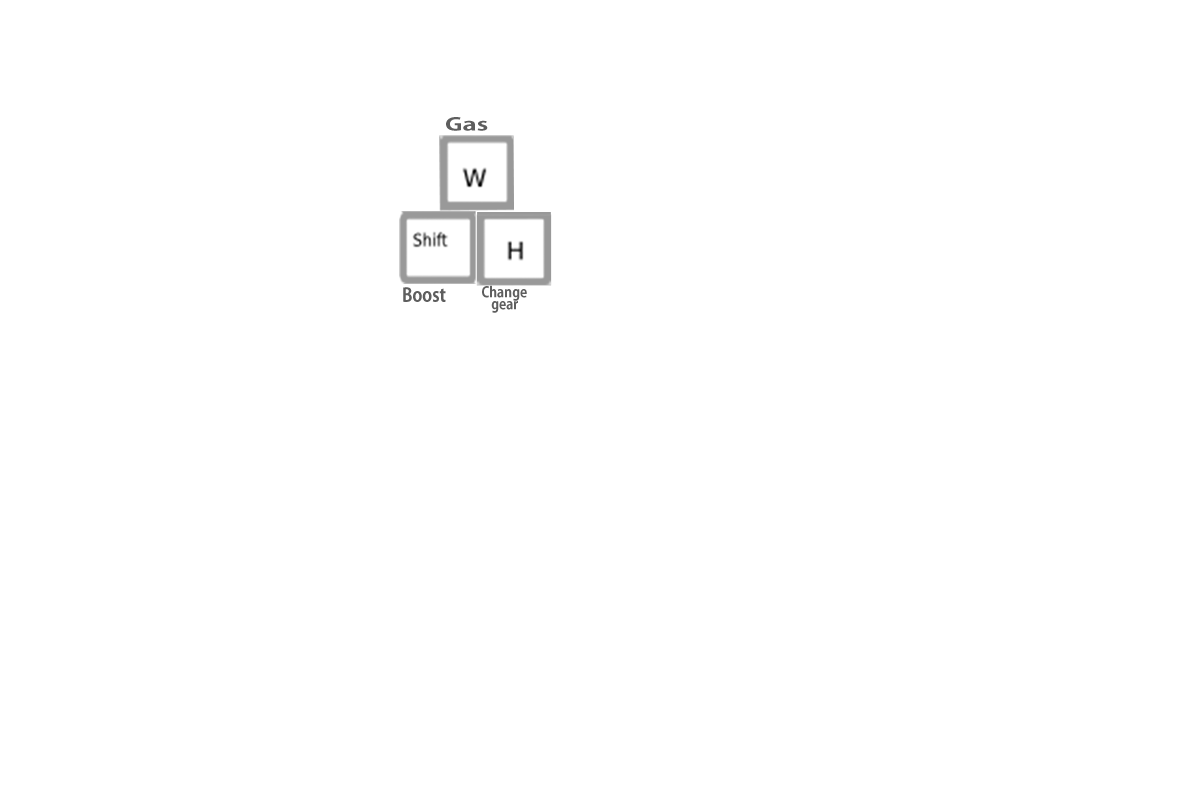
<style>
.page{position:relative;width:1200px;height:800px;background:#ffffff}
.page>*{position:absolute;margin:0}
.t1{font:17.1px "AdobeGothicStd-Bold";color:#5e5e5e;scale:1.49 1}
.t2{font:18.9px "AdobeGothicStd-Bold";color:#5e5e5e;scale:0.88 1}
.t3{font:14.2px "AdobeGothicStd-Bold";color:#5e5e5e;scale:0.92 1}
.t4{font:14.2px "AdobeGothicStd-Bold";color:#5e5e5e;scale:0.91 1}
</style>
<div class="page">
<p class="t1" style="left:446px;top:117px;width:42px;height:14px">Gas</p>
<p class="t2" style="left:403px;top:287px;width:43px;height:15px">Boost</p>
<p class="t3" style="left:482px;top:285px;width:45px;height:16px">Change</p>
<p class="t4" style="left:491px;top:301px;width:27px;height:12px">gear</p>
</div>
